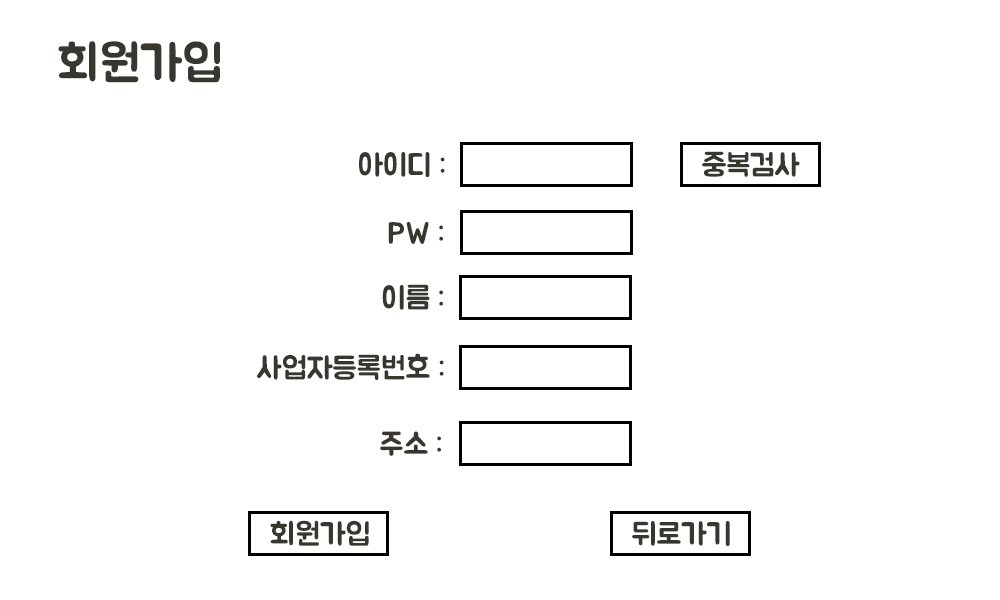
<style>
.page{position:relative;width:1000px;height:600px;background:#ffffff}
.page>*{position:absolute;margin:0}
.t1{font:50px "BMJUA";color:#38362f}
.t2{font:30.6px "BMJUA";color:#38362f}
</style>
<div class="page">
<p class="t1" style="left:58px;top:41px;width:162px;height:42px">회원가입</p>
<p class="t2" style="left:359px;top:152px;width:86px;height:25px">아이디 :</p>
<p class="t2" style="left:702px;top:151px;width:98px;height:26px">중복검사</p>
<p class="t2" style="left:388px;top:222px;width:55px;height:22px">PW :</p>
<p class="t2" style="left:382px;top:284px;width:61px;height:26px">이름 :</p>
<p class="t2" style="left:257px;top:353px;width:187px;height:27px">사업자등록번호 :</p>
<p class="t2" style="left:380px;top:431px;width:61px;height:25px">주소 :</p>
<p class="t2" style="left:270px;top:520px;width:99px;height:26px">회원가입</p>
<p class="t2" style="left:632px;top:521px;width:98px;height:25px">뒤로가기</p>
</div>
